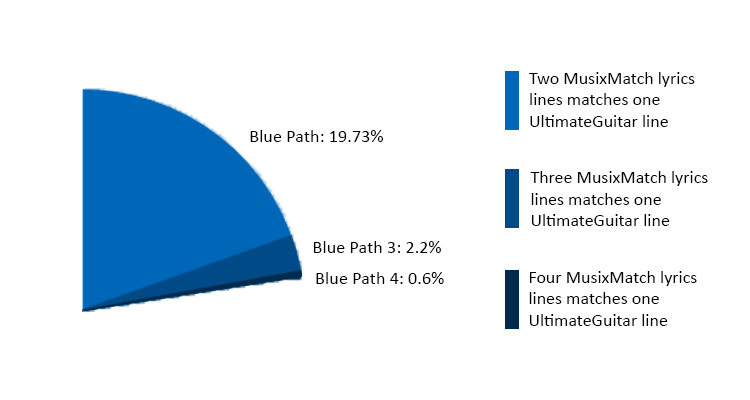
<style>
.page{position:relative;width:750px;height:400px;background:#ffffff}
.page>*{position:absolute;margin:0}
.t1{font:18px "Calibri";color:#000000}
.t2{font:18.3px "Calibri";color:#000000}
</style>
<div class="page">
<p class="t1" style="left:529px;top:72px;width:166px;height:55px">Two MusixMatch lyrics<br>lines matches one<br>UltimateGuitar line</p>
<p class="t2" style="left:250px;top:130px;width:133px;height:12px">Blue Path: 19.73%</p>
<p class="t1" style="left:530px;top:171px;width:178px;height:55px">Three MusixMatch lyrics<br>lines matches one<br>UltimateGuitar line</p>
<p class="t2" style="left:313px;top:241px;width:128px;height:12px">Blue Path 3: 2.2%</p>
<p class="t2" style="left:316px;top:272px;width:128px;height:12px">Blue Path 4: 0.6%</p>
<p class="t1" style="left:529px;top:271px;width:168px;height:55px">Four MusixMatch lyrics<br>lines matches one<br>UltimateGuitar line</p>
</div>
